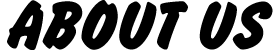
<style>
.page{position:relative;width:280px;height:50px;background:#000000}
.page>*{position:absolute;margin:0}
.t1{font:72px "BrushHandNew";color:#000000}
</style>
<div class="page">
<p class="t1" style="left:7px;top:0px;width:266px;height:51px">ABOUT US</p>
</div>
